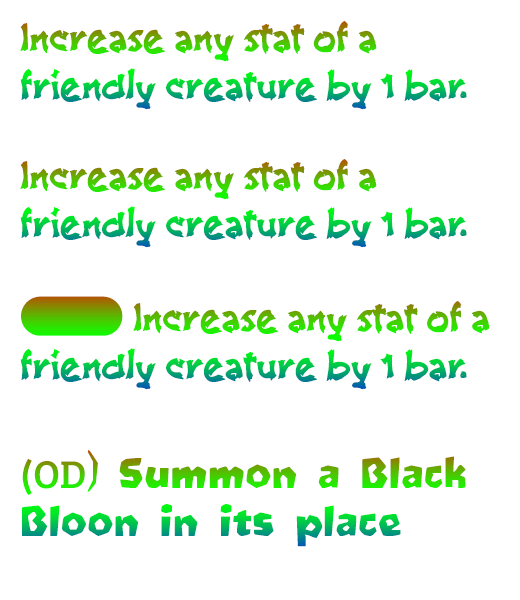
<style>
.page{position:relative;width:520px;height:600px;background:#ffffff}
.page>*{position:absolute;margin:0}
.t1{font:40px/48px "bBambooGrove"}
.t2{font:40px/48px "stoogedings-Regular"}
.t3{font:40px/48px "Oetztype"}
</style>
<div class="page">
<p class="t1" style="left:20px;top:21px;width:447px;height:89px">Increase any stat of a<br>friendly creature by 1 bar.</p>
<p class="t1" style="left:20px;top:159px;width:447px;height:89px">Increase any stat of a<br>friendly creature by 1 bar.</p>
<p class="t1" style="left:20px;top:296px;width:470px;height:94px"><span class="t2">(1GCD)</span> Increase any stat of a<br>friendly creature by 1 bar.</p>
<p class="t3" style="left:22px;top:450px;width:444px;height:97px"><span class="t2"><br>(OD</span>) Summon a Black<br>Bloon in its place</p>
</div>
